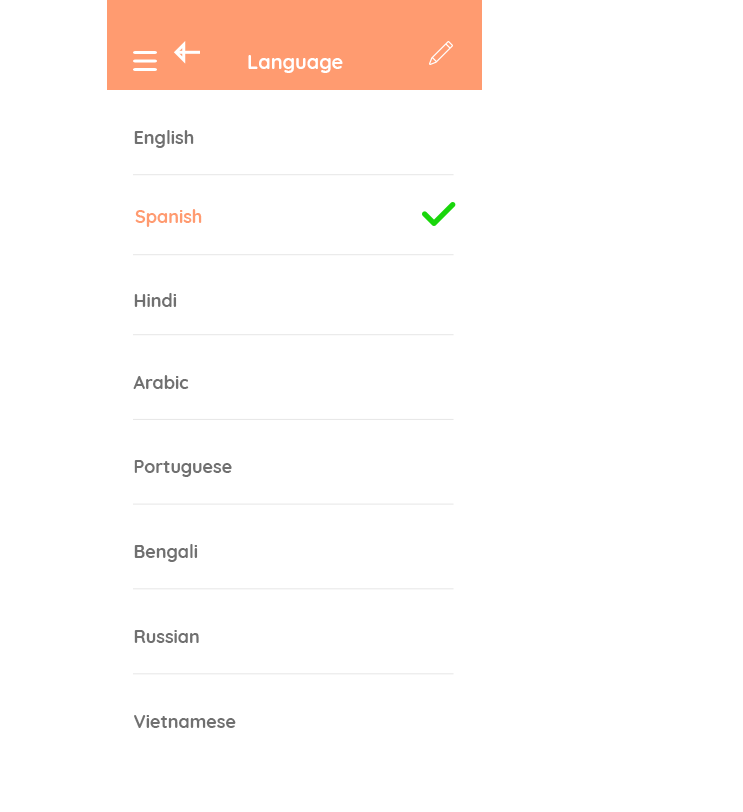
<style>
.page{position:relative;width:743px;height:812px;background:#ffffff}
.page>*{position:absolute;margin:0}
.t1{font:20px "Quicksand-Bold";color:#ffffff}
.t2{font:18px "Quicksand-Bold";color:#707070}
.t3{font:18px "Quicksand-Bold";color:#ff9b70}
</style>
<div class="page">
<p class="t1" style="left:248px;top:55px;width:95px;height:18px">Language</p>
<p class="t2" style="left:134px;top:130px;width:60px;height:18px">English</p>
<p class="t3" style="left:135px;top:209px;width:67px;height:18px">Spanish</p>
<p class="t2" style="left:134px;top:293px;width:43px;height:14px">Hindi</p>
<p class="t2" style="left:133px;top:375px;width:56px;height:14px">Arabic</p>
<p class="t2" style="left:134px;top:460px;width:98px;height:17px">Portuguese</p>
<p class="t2" style="left:134px;top:544px;width:64px;height:18px">Bengali</p>
<p class="t2" style="left:134px;top:630px;width:65px;height:13px">Russian</p>
<p class="t2" style="left:134px;top:715px;width:102px;height:13px">Vietnamese</p>
</div>
